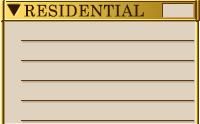
<style>
.page{position:relative;width:200px;height:124px;background:#dfd3c0}
.page>*{position:absolute;margin:0}
.t1{font:16px "CenturySchoolbook";letter-spacing:0.025em;color:#321a02}
</style>
<div class="page">
<p class="t1" style="left:24px;top:4px;width:120px;height:13px">RESIDENTIAL</p>
</div>
